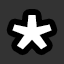
<style>
.page{position:relative;width:64px;height:64px;background:#333333}
.page>*{position:absolute;margin:0}
.t1{font:70px "SourceCodePro-Black";color:#ffffff;scale:1.14 1}
</style>
<div class="page">
<p class="t1" style="left:12px;top:15px;width:40px;height:35px">*</p>
</div>
